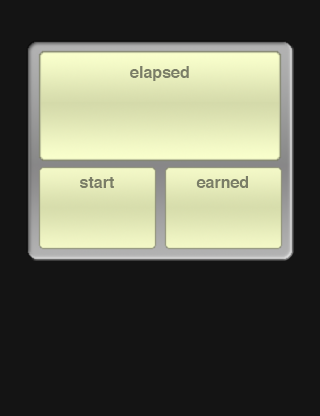
<style>
.page{position:relative;width:320px;height:416px;background:#141414}
.page>*{position:absolute;margin:0}
.t1{font:16px "Helvetica-Bold";color:#7a7d67}
</style>
<div class="page">
<p class="t1" style="left:130px;top:66px;width:59px;height:15px">elapsed</p>
<p class="t1" style="left:80px;top:177px;width:34px;height:11px">start</p>
<p class="t1" style="left:196px;top:176px;width:52px;height:12px">earned</p>
</div>
